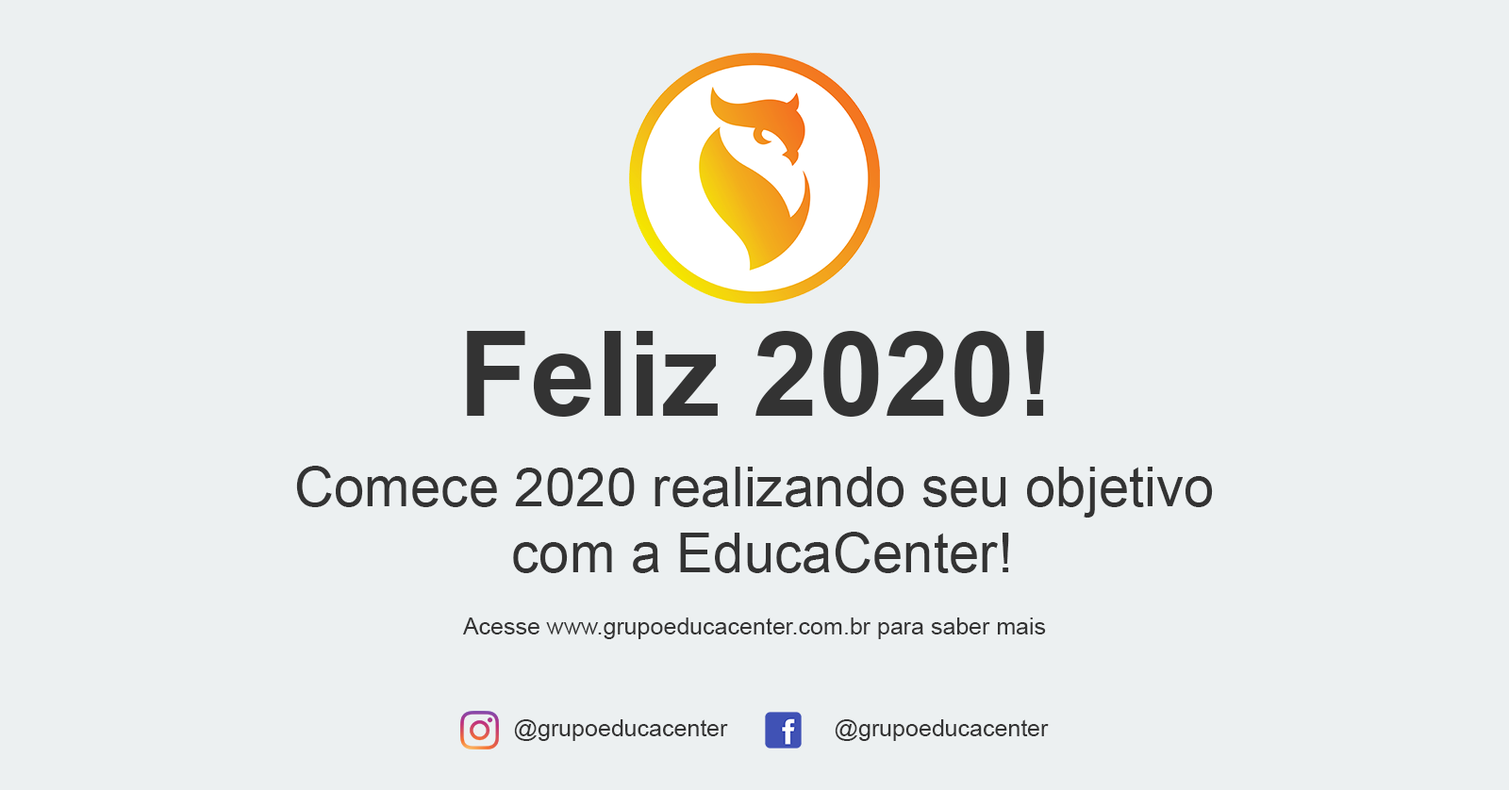
<style>
.page{position:relative;width:1509px;height:790px;background:#ecf0f1}
.page>*{position:absolute;margin:0}
.t1{font:117.9px "Arial-BoldMT";color:#333333}
.t2{font:55px "ArialMT";color:#333333}
.t3{font:23.6px "ArialMT";color:#333333}
</style>
<div class="page">
<p class="t1" style="left:467px;top:331px;width:577px;height:86px">Feliz 2020!</p>
<p class="t2" style="left:296px;top:466px;width:917px;height:107px;text-align:center">Comece 2020 realizando seu objetivo <br>com a EducaCenter!</p>
<p class="t3" style="left:463px;top:618px;width:583px;height:21px">Acesse www.grupoeducacenter.com.br para saber mais</p>
<p class="t3" style="left:514px;top:720px;width:214px;height:21px">@grupoeducacenter</p>
<p class="t3" style="left:835px;top:720px;width:214px;height:21px">@grupoeducacenter</p>
</div>
